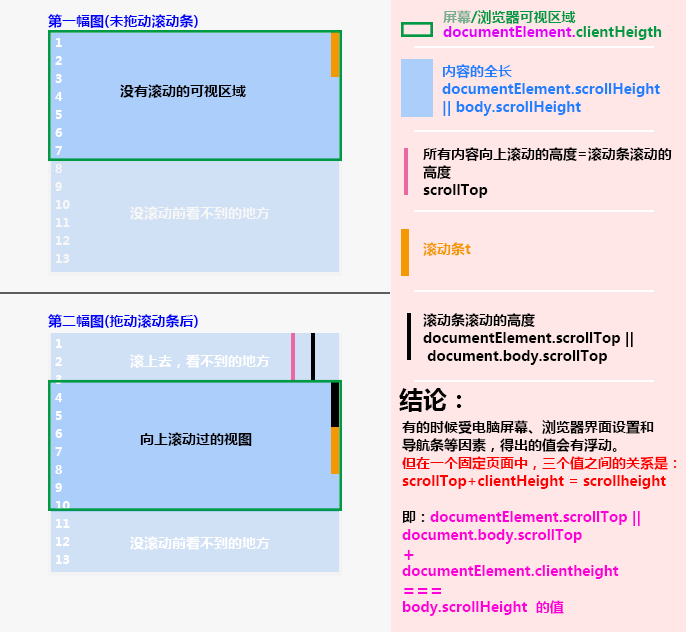
<style>
.page{position:relative;width:686px;height:632px;background:#ffe7e7}
.page>*{position:absolute;margin:0}
.t1{font:14px "MicrosoftYaHei-Bold";color:#0000f8}
.t2{font:14px/15px "MicrosoftYaHei-Bold";color:#e000fb}
.t3{font:14px/15px "MicrosoftYaHei-Bold";color:#79af91}
.t4{font:14px/15px "MicrosoftYaHei-Bold";color:#009944}
.t5{font:12px/18px "MicrosoftYaHei-Bold";color:#ffffff}
.t6{font:14px/18px "MicrosoftYaHei-Bold";color:#1e7fff}
.t7{font:14px "MicrosoftYaHei-Bold";color:#000000}
.t8{font:14px/18px "MicrosoftYaHei-Bold";color:#000000}
.t9{font:14px "MicrosoftYaHei-Bold";color:#ffffff}
.t10{font:14px "MicrosoftYaHei-Bold";color:#f39800}
.t11{font:24px "MicrosoftYaHei-Bold";color:#000000}
.t12{font:14px/18px "MicrosoftYaHei-Bold";color:#fe0000}
.t13{font:14px/18px "MicrosoftYaHei-Bold";color:#fe00d7}
.t14{font:18px/18px "MicrosoftYaHei-Bold";color:#fe00d7}
</style>
<div class="page">
<p class="t1" style="left:48px;top:14px;width:150px;height:14px">第一幅图(未拖动滚动条)</p>
<p class="t2" style="left:443px;top:10px;width:219px;height:30px"><span class="t3">屏幕</span><span class="t4">/浏览器可视区域  <br></span>documentElement.<span class="t4">clientHeigth</span></p>
<p class="t5" style="left:55px;top:38px;width:15px;height:225px">1<br>2<br>3<br>4<br>5<br>6<br>7<br>8<br>9<br>10<br>11<br>12<br>13</p>
<p class="t6" style="left:442px;top:64px;width:218px;height:52px">内容的全长<br>documentElement.scrollHeight<br>|| body.scrollHeight</p>
<p class="t7" style="left:120px;top:84px;width:126px;height:14px">没有滚动的可视区域</p>
<p class="t8" style="left:423px;top:147px;width:249px;height:51px">所有内容向上滚动的高度=滚动条滚动的<br>高度<br>scrollTop</p>
<p class="t9" style="left:130px;top:206px;width:140px;height:14px">没滚动前看不到的地方</p>
<p class="t10" style="left:423px;top:242px;width:48px;height:14px">滚动条t</p>
<p class="t1" style="left:48px;top:314px;width:150px;height:14px">第二幅图(拖动滚动条后)</p>
<p class="t8" style="left:423px;top:313px;width:210px;height:52px">滚动条滚动的高度<br>documentElement.scrollTop ||<br> document.body.scrollTop</p>
<p class="t5" style="left:55px;top:339px;width:15px;height:225px">1<br>2<br>3<br>4<br>5<br>6<br>7<br>8<br>9<br>10<br>11<br>12<br>13</p>
<p class="t9" style="left:130px;top:354px;width:140px;height:14px">滚上去，看不到的地方</p>
<p class="t11" style="left:399px;top:388px;width:63px;height:24px">结论：</p>
<p class="t12" style="left:402px;top:420px;width:275px;height:196px"><span class="t8">有的时候受电脑屏幕、浏览器界面设置和<br>导航条等因素，得出的值会有浮动。<br></span>但在一个固定页面中，三个值之间的关系是：<br>scrollTop+clientHeight = scrollheight<br><br><span class="t8">即：</span><span class="t13">documentElement.scrollTop || <br>document.body.scrollTop <br></span><span class="t14">+</span><span class="t13"> <br>documentElement.clientheight <br></span><span class="t14">=== <br></span><span class="t13">body.scrollHeight  的值</span></p>
<p class="t7" style="left:140px;top:432px;width:112px;height:14px">向上滚动过的视图</p>
<p class="t9" style="left:130px;top:536px;width:140px;height:14px">没滚动前看不到的地方</p>
</div>
